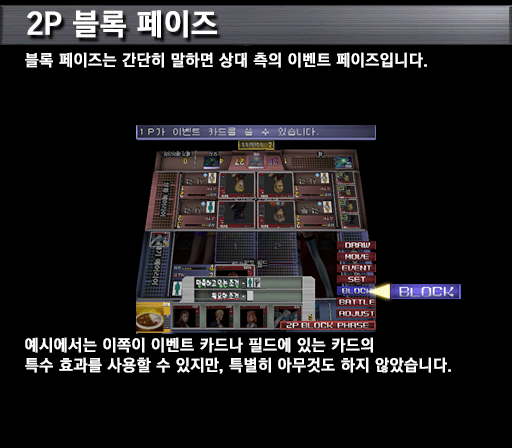
<style>
.page{position:relative;width:512px;height:448px;background:#000000}
.page>*{position:absolute;margin:0}
.t1{font:30px "KoreanGD15-R";color:#ffffff;font-weight:bold}
.t2{font:16px "KoreanGD15-R";color:#ffffff;font-weight:bold}
.t3{font:16px/20px "KoreanGD15-R";color:#ffffff;font-weight:bold}
</style>
<div class="page">
<p class="t1" style="left:27px;top:10px;width:190px;height:28px">2P 블록 페이즈</p>
<p class="t2" style="left:25px;top:52px;width:402px;height:16px">블록 페이즈는 간단히 말하면 상대 측의 이벤트 페이즈입니다.</p>
<p class="t3" style="left:25px;top:337px;width:426px;height:37px">예시에서는 이쪽이 이벤트 카드나 필드에 있는 카드의<br>특수 효과를 사용할 수 있지만, 특별히 아무것도 하지 않았습니다.</p>
</div>
